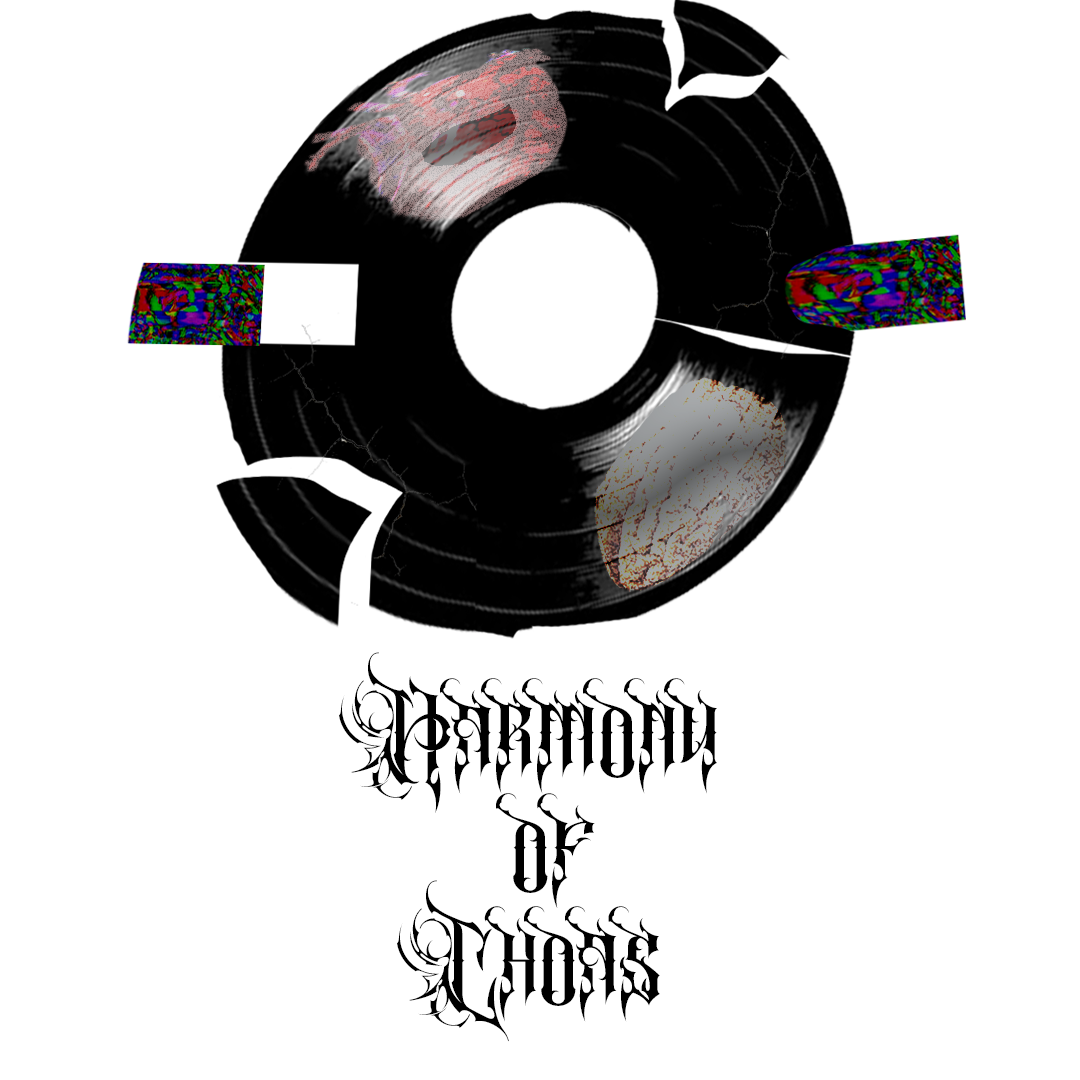
<style>
.page{position:relative;width:1080px;height:1080px;background:#ffffff}
.page>*{position:absolute;margin:0}
.t1{font:95.3px "QueenlordPersonaluse-Regular";color:#000000}
</style>
<div class="page">
<p class="t1" style="left:339px;top:652px;width:378px;height:161px">Harmony</p>
<p class="t1" style="left:496px;top:793px;width:99px;height:115px">of</p>
<p class="t1" style="left:397px;top:880px;width:263px;height:162px">Choas</p>
</div>
